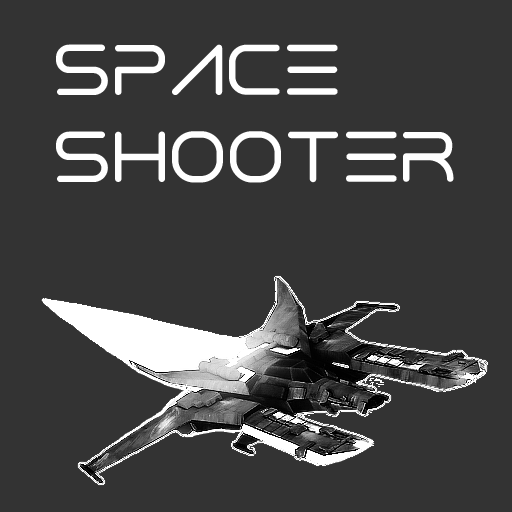
<style>
.page{position:relative;width:512px;height:512px;background:#333333}
.page>*{position:absolute;margin:0}
.t1{font:72px "NeoAtomed-Regular";color:#ffffff}
</style>
<div class="page">
<p class="t1" style="left:56px;top:44px;width:398px;height:139px">SPACE<br>SHOOTER</p>
</div>
